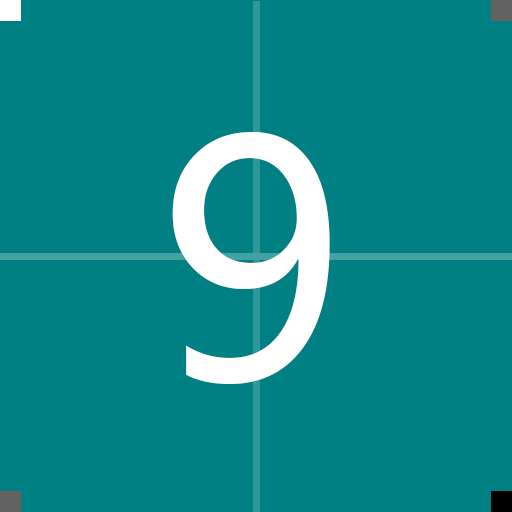
<style>
.page{position:relative;width:512px;height:512px;background:#008083}
.page>*{position:absolute;margin:0}
.t1{font:323.1px "MicrosoftYaHei";color:#ffffff}
</style>
<div class="page">
<p class="t1" style="left:172px;top:132px;width:158px;height:252px">9</p>
</div>
